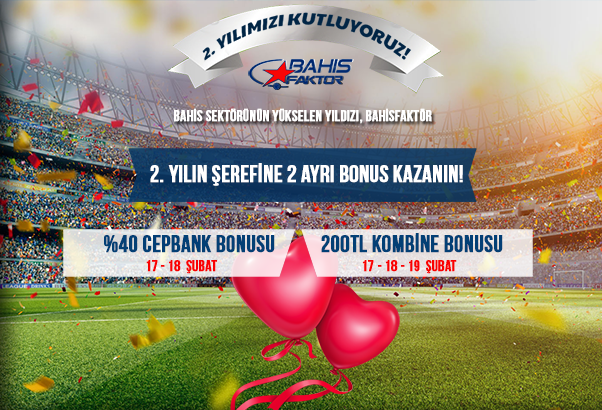
<style>
.page{position:relative;width:602px;height:410px}
.page>*{position:absolute;margin:0}
.t1{font:15.1px "BebasNeue";color:#ffffff;font-weight:bold}
.t2{font:23.2px "BebasNeue";color:#ffffff;font-weight:bold}
.t3{font:23.2px "BebasNeue";color:#033f75;font-weight:bold}
.t4{font:15.1px "BebasNeue";color:#fa0101;font-weight:bold}
</style>
<div class="page">
<p class="t1" style="left:174px;top:108px;width:258px;height:16px">BAHİS SEKTÖRÜNÜN YÜKSELEN YILDIZI, BAHİSFAKTÖR</p>
<p class="t2" style="left:150px;top:163px;width:313px;height:23px">2. yılın şerefİNE 2 AYRI BONUS KAZANIN!</p>
<p class="t3" style="left:321px;top:233px;width:182px;height:20px">200tl kombİNE BONUSU</p>
<p class="t3" style="left:104px;top:235px;width:171px;height:18px">%40 cepbank bonusu</p>
<p class="t4" style="left:146px;top:260px;width:71px;height:14px">17 - 18  ŞUBAT</p>
<p class="t4" style="left:363px;top:260px;width:94px;height:14px">17 - 18 - 19  ŞUBAT</p>
</div>
